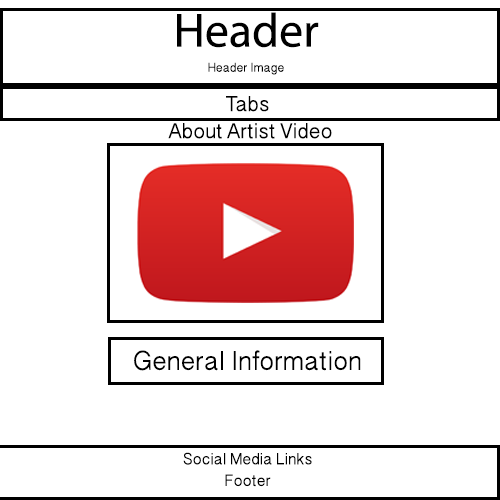
<style>
.page{position:relative;width:500px;height:500px;background:#ffffff}
.page>*{position:absolute;margin:0}
.t1{font:48px "MyriadPro-Regular";color:#000000}
.t2{font:14px "OriyaSangamMN";color:#000000}
.t3{font:24px "OriyaSangamMN";color:#000000}
.t4{font:30px "OriyaSangamMN";color:#000000}
.t5{font:18px "OriyaSangamMN";color:#000000}
</style>
<div class="page">
<p class="t1" style="left:177px;top:12px;width:142px;height:36px">Header</p>
<p class="t2" style="left:208px;top:62px;width:76px;height:13px">Header Image</p>
<p class="t3" style="left:226px;top:96px;width:43px;height:16px">Tabs</p>
<p class="t3" style="left:168px;top:123px;width:164px;height:16px">About Artist Video</p>
<p class="t4" style="left:134px;top:350px;width:227px;height:21px">General Information</p>
<p class="t5" style="left:183px;top:452px;width:129px;height:35px;text-align:center">Social Media Links<br>Footer</p>
</div>
